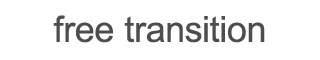
<style>
.page{position:relative;width:320px;height:60px;background:#ffffff}
.page>*{position:absolute;margin:0}
.t1{font:36px "ArialMT";color:#4d4d4f}
</style>
<div class="page">
<p class="t1" style="left:53px;top:15px;width:212px;height:28px">free transition</p>
</div>
